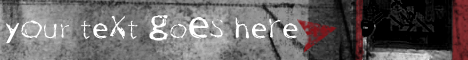
<style>
.page{position:relative;width:468px;height:60px}
.page>*{position:absolute;margin:0}
.t1{font:30px "OneWayRegular";letter-spacing:0.05em;color:#ffffff}
</style>
<div class="page">
<p class="t1" style="left:5px;top:15px;width:293px;height:29px">yOur teXt GoES heRe</p>
</div>
